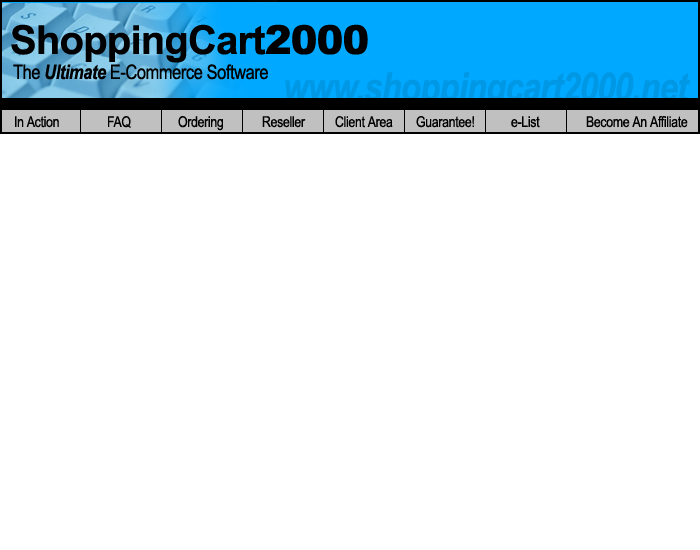
<style>
.page{position:relative;width:700px;height:550px;background:#ffffff}
.page>*{position:absolute;margin:0}
.t1{font:40px "Arial-BoldMT";letter-spacing:-0.02em;color:#000000}
.t2{font:40px "Arial-Black";letter-spacing:-0.02em;color:#000000}
.t3{font:20px "ArialNarrow";letter-spacing:-0.02em;color:#000000}
.t4{font:20px "ArialNarrow-BoldItalic";letter-spacing:-0.02em;color:#000000}
.t5{font:15px "ArialNarrow";letter-spacing:-0.02em;color:#000000}
</style>
<div class="page">
<p class="t1" style="left:11px;top:24px;width:357px;height:39px">ShoppingCart<span class="t2">2000</span></p>
<p class="t3" style="left:13px;top:64px;width:255px;height:16px">The <span class="t4">Ultimate</span> E-Commerce Software</p>
<p class="t5" style="left:15px;top:116px;width:44px;height:12px">In Action</p>
<p class="t5" style="left:108px;top:116px;width:23px;height:12px">FAQ</p>
<p class="t5" style="left:178px;top:116px;width:45px;height:15px">Ordering</p>
<p class="t5" style="left:262px;top:116px;width:44px;height:12px">Reseller</p>
<p class="t5" style="left:335px;top:116px;width:58px;height:12px">Client Area</p>
<p class="t5" style="left:416px;top:116px;width:58px;height:12px">Guarantee!</p>
<p class="t5" style="left:511px;top:116px;width:29px;height:12px">e-List</p>
<p class="t5" style="left:586px;top:116px;width:102px;height:12px">Become An Affiliate</p>
</div>
